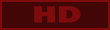
<style>
.page{position:relative;width:110px;height:30px;background:#420606}
.page>*{position:absolute;margin:0}
.t1{font:24px "FranklinGothic-Heavy";color:#7f0c0c;scale:1.5 1}
</style>
<div class="page">
<p class="t1" style="left:34px;top:6px;width:47px;height:17px">HD</p>
</div>
